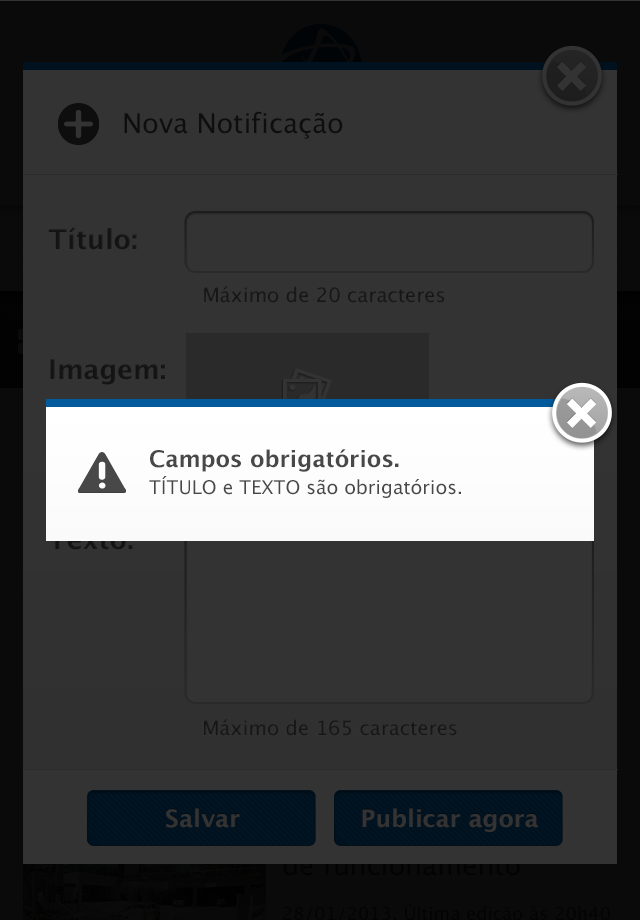
<style>
.page{position:relative;width:640px;height:920px;background:#333333}
.page>*{position:absolute;margin:0}
.t1{font:27.2px "LucidaGrande";color:#0e0e0e}
.t2{font:27.2px "LucidaGrande-Bold";color:#141414}
.t3{font:19.9px "LucidaGrande";color:#181818}
.t4{font:19px/27.2px "LucidaGrande";color:#484848}
.t5{font:22.6px/27.2px "LucidaGrande-Bold";color:#484848}
.t6{font:24px "LucidaGrande-Bold";color:#333333}
</style>
<div class="page">
<p class="t1" style="left:124px;top:111px;width:219px;height:28px">Nova Notificação</p>
<p class="t2" style="left:48px;top:227px;width:89px;height:23px">Título:</p>
<p class="t3" style="left:204px;top:286px;width:241px;height:17px">Máximo de 20 caracteres</p>
<p class="t2" style="left:50px;top:359px;width:115px;height:26px">Imagem:</p>
<p class="t4" style="left:149px;top:449px;width:312px;height:49px"><span class="t5">Campos obrigatórios.<br></span>TÍTULO e TEXTO são obrigatórios.</p>
<p class="t3" style="left:204px;top:719px;width:253px;height:17px">Máximo de 165 caracteres</p>
<p class="t6" style="left:166px;top:808px;width:74px;height:20px">Salvar</p>
<p class="t6" style="left:362px;top:808px;width:176px;height:24px">Publicar agora</p>
</div>
